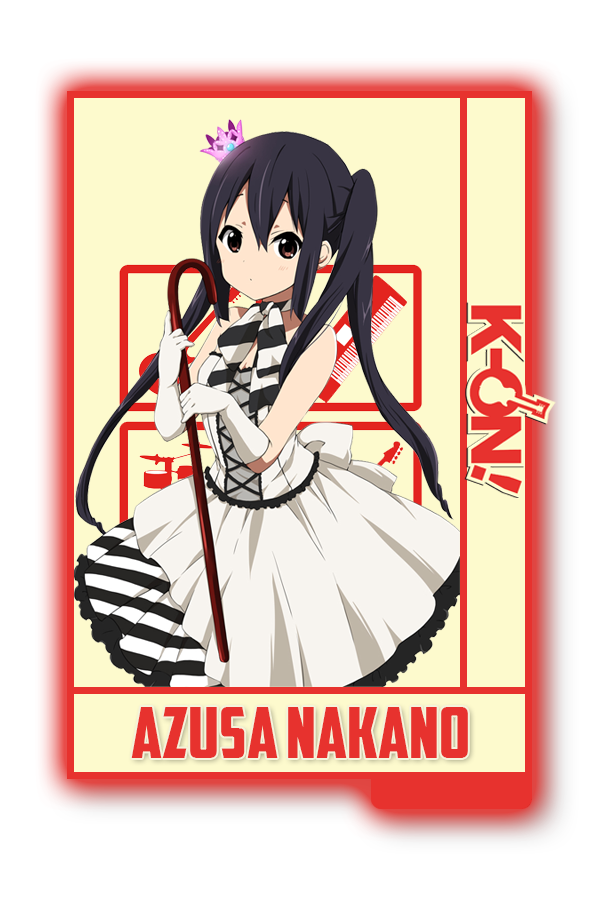
<style>
.page{position:relative;width:600px;height:900px;background:#fdfacd}
.page>*{position:absolute;margin:0}
.t1{font:70.8px "AmericanCaptain";color:#e7322e}
</style>
<div class="page">
<p class="t1" style="left:131px;top:707px;width:337px;height:51px">azusa nakano</p>
</div>
